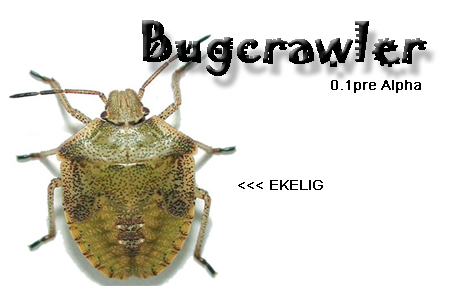
<style>
.page{position:relative;width:455px;height:295px;background:#ffffff}
.page>*{position:absolute;margin:0}
.t1{font:48px "Jokerman-Regular";color:#000000;font-weight:bold}
.t2{font:14px "ArialMT";color:#000000;font-weight:bold}
</style>
<div class="page">
<p class="t1" style="left:142px;top:20px;width:285px;height:56px">Bugcrawler</p>
<p class="t2" style="left:331px;top:80px;width:90px;height:13px">0.1pre Alpha</p>
<p class="t2" style="left:238px;top:180px;width:85px;height:10px">&lt;&lt;&lt; EKELIG</p>
</div>
